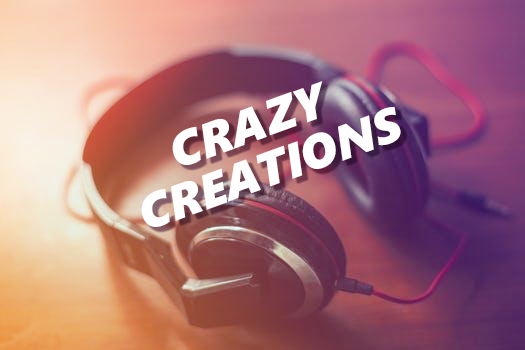
<style>
.page{position:relative;width:525px;height:350px}
.page>*{position:absolute;margin:0}
.t1{font:48px/48px "SegoeUIBlack-Italic";color:#ffffff;text-transform:uppercase}
</style>
<div class="page">
<p class="t1" style="left:141px;top:81px;width:260px;height:146px;text-align:center;rotate:-20deg">Crazy <br>Creations</p>
</div>
